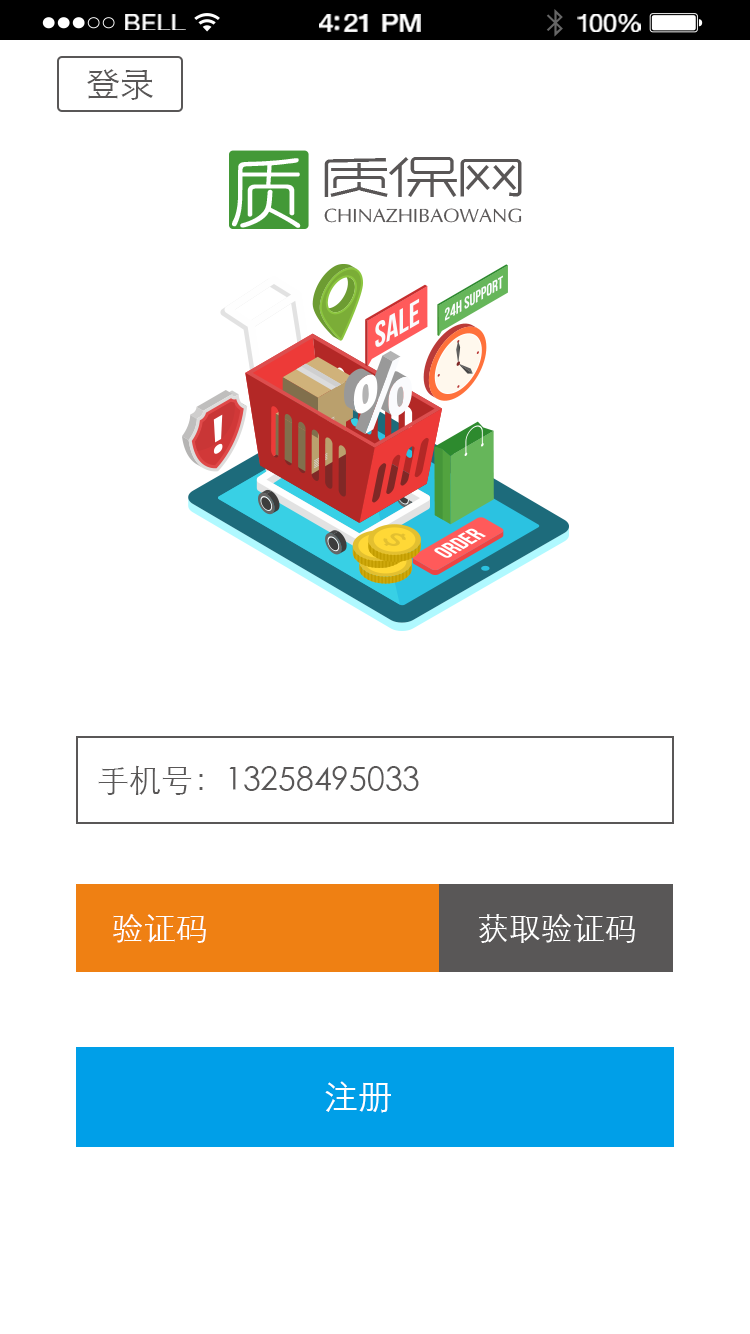
<style>
.page{position:relative;width:750px;height:1334px;background:#ffffff}
.page>*{position:absolute;margin:0}
.t1{font:23.3px "HelveticaNeue";letter-spacing:0.02em;color:#ffffff;scale:1.06 1}
.t2{font:25.3px "HelveticaNeue-Medium";letter-spacing:-0.02em;color:#ffffff;scale:1.06 1}
.t3{font:24.3px "HelveticaNeue";letter-spacing:-0.02em;color:#ffffff;scale:1.06 1}
.t4{font:34px "STXihei";color:#595757}
.t5{font:32px "STXihei";color:#595757}
.t6{font:32px "STXihei";color:#ffffff}
.t7{font:34px "STXihei";color:#ffffff}
</style>
<div class="page">
<p class="t1" style="left:125px;top:14px;width:61px;height:16px">BELL</p>
<p class="t2" style="left:319px;top:14px;width:102px;height:18px">4:21 PM</p>
<p class="t3" style="left:577px;top:14px;width:64px;height:18px">100%</p>
<p class="t4" style="left:87px;top:69px;width:66px;height:31px">登录</p>
<p class="t5" style="left:98px;top:765px;width:321px;height:30px">手机号：13258495033</p>
<p class="t6" style="left:113px;top:914px;width:93px;height:29px">验证码</p>
<p class="t6" style="left:479px;top:914px;width:156px;height:29px">获取验证码</p>
<p class="t7" style="left:325px;top:1081px;width:66px;height:32px">注册</p>
</div>
